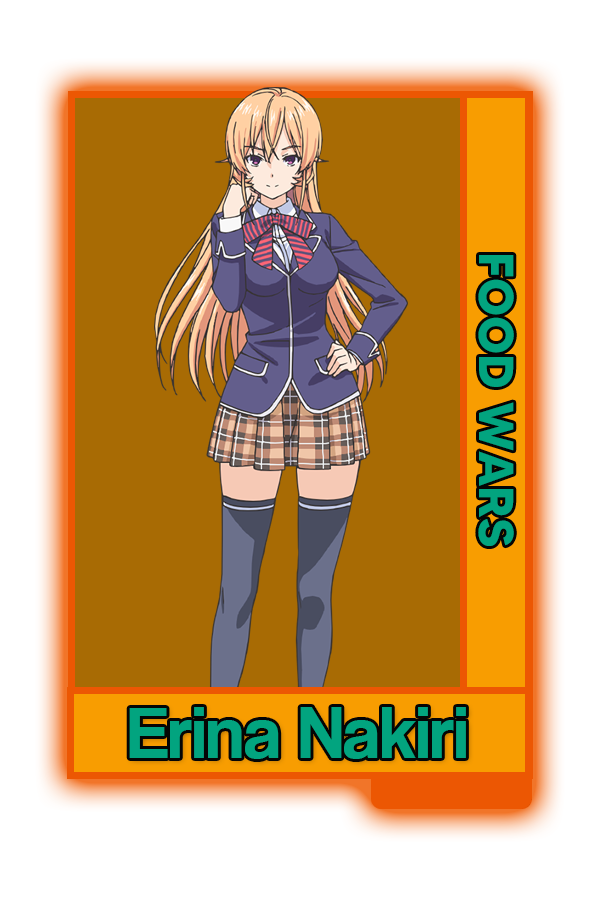
<style>
.page{position:relative;width:600px;height:900px;background:#a86b04}
.page>*{position:absolute;margin:0}
.t1{font:48.8px "MADETOMMY-Bold";color:#009f7b}
.t2{font:75px "CoolveticaRg-Regular";color:#009f7b}
</style>
<div class="page">
<p class="t1" style="left:478px;top:255px;width:36px;height:291px;rotate:90deg">FOOD WARS</p>
<p class="t2" style="left:129px;top:707px;width:337px;height:52px">Erina Nakiri</p>
</div>
